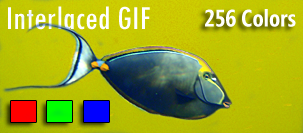
<style>
.page{position:relative;width:303px;height:133px}
.page>*{position:absolute;margin:0}
.t1{font:34.9px "TwCenMT-Condensed";color:#ffffff}
.t2{font:23.6px "SegoeCondensed-Bold";color:#ffffff}
</style>
<div class="page">
<p class="t1" style="left:8px;top:6px;width:142px;height:24px">Interlaced GIF</p>
<p class="t2" style="left:205px;top:9px;width:91px;height:18px">256 Colors</p>
</div>
